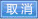
<style>
.page{position:relative;width:38px;height:19px}
.page>*{position:absolute;margin:0}
.t1{font:11.5px "MicrosoftYaHei";color:#fcfafa}
</style>
<div class="page">
<p class="t1" style="left:6px;top:3px;width:26px;height:12px">取 消</p>
</div>
